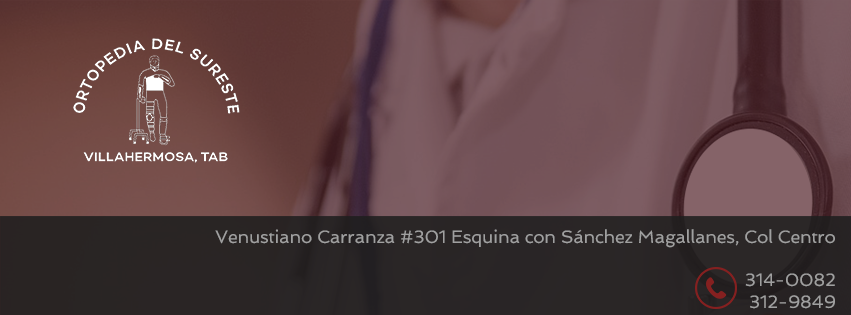
<style>
.page{position:relative;width:851px;height:315px}
.page>*{position:absolute;margin:0}
.t1{font:17.9px "Spinnaker-Regular";letter-spacing:-0.01em;color:#a0a0a0}
</style>
<div class="page">
<p class="t1" style="left:215px;top:229px;width:620px;height:80px;text-align:right">Venustiano Carranza #301 Esquina con Sánchez Magallanes, Col Centro<br><br>314-0082<br>312-9849</p>
</div>
